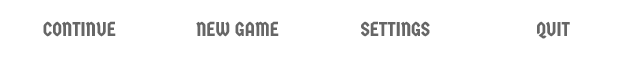
<style>
.page{position:relative;width:632px;height:58px;background:#ffffff}
.page>*{position:absolute;margin:0}
.t1{font:20px "GermaniaOne-Regular";color:#666666}
</style>
<div class="page">
<p class="t1" style="left:43px;top:21px;width:73px;height:16px">CONTINUE</p>
<p class="t1" style="left:196px;top:21px;width:83px;height:16px">NEW GAME</p>
<p class="t1" style="left:361px;top:21px;width:69px;height:16px">SETTINGS</p>
<p class="t1" style="left:537px;top:21px;width:33px;height:18px">QUIT</p>
</div>
